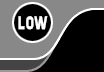
<style>
.page{position:relative;width:104px;height:72px;background:#000000}
.page>*{position:absolute;margin:0}
.t1{font:18.4px "MaximusCondensed-Bold";color:#ffffff;scale:1.05 1}
</style>
<div class="page">
<p class="t1" style="left:18px;top:16px;width:30px;height:14px">LOW</p>
</div>
